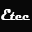
<style>
.page{position:relative;width:32px;height:32px;background:#080808}
.page>*{position:absolute;margin:0}
.t1{font:15.7px "Magneto-Bold";color:#ffffff;scale:0.76 1}
</style>
<div class="page">
<p class="t1" style="left:1px;top:9px;width:29px;height:11px">Etec</p>
</div>
